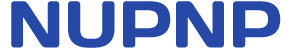
<style>
.page{position:relative;width:287px;height:48px;background:#2648a6}
.page>*{position:absolute;margin:0}
.t1{font:66px "Days";color:#2648a6}
</style>
<div class="page">
<p class="t1" style="left:11px;top:1px;width:270px;height:47px">NUPNP</p>
</div>
